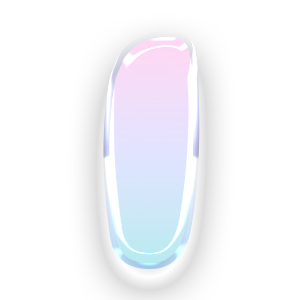
<style>
.page{position:relative;width:300px;height:300px;background:#ffffff}
.page>*{position:absolute;margin:0}
.t1{font:300px "BubbleGum"}
</style>
<div class="page">
<p class="t1" style="left:109px;top:37px;width:85px;height:226px">I</p>
<p class="t1" style="left:109px;top:37px;width:85px;height:226px">I</p>
</div>
